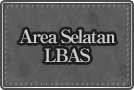
<style>
.page{position:relative;width:134px;height:90px}
.page>*{position:absolute;margin:0}
.t1{font:18px/19px "RyuminPro-ExBold";letter-spacing:-0.08em;color:#cbcbcb}
</style>
<div class="page">
<p class="t1" style="left:19px;top:29px;width:97px;height:34px;text-align:center">Area Selatan<br>LBAS</p>
</div>
